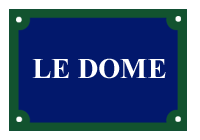
<style>
.page{position:relative;width:200px;height:140px;background:#02186c}
.page>*{position:absolute;margin:0}
.t1{font:28.7px "TimesNewRomanPS-BoldMT";color:#ffffff}
</style>
<div class="page">
<p class="t1" style="left:32px;top:58px;width:134px;height:21px">LE DOME</p>
</div>
